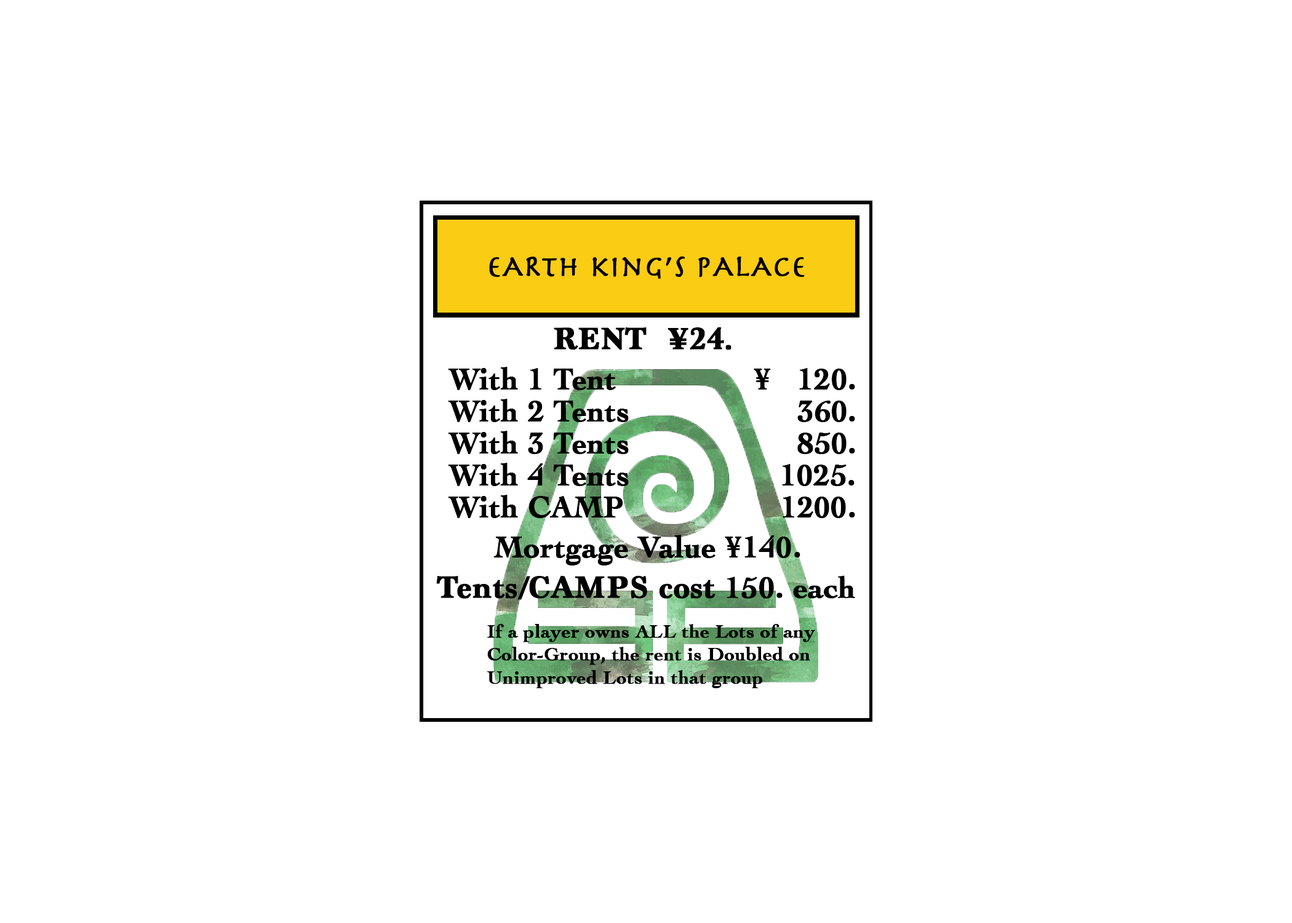
<style>
.page{position:relative;width:1292px;height:923px;background:#ffffff}
.page>*{position:absolute;margin:0}
.t1{font:30.8px "Herculanum";color:#000000;font-weight:bold}
.t2{font:32px "Marion-Bold";color:#000000;font-weight:bold}
.t3{font:30.8px "Cochin-Bold";color:#000000;font-weight:bold}
.t4{font:19.2px "Cochin-Bold";color:#000000;font-weight:bold}
</style>
<div class="page">
<p class="t1" style="left:489px;top:256px;width:316px;height:23px">EARth king’s pAlAce</p>
<p class="t2" style="left:554px;top:327px;width:178px;height:23px">RENT  ¥24.</p>
<p class="t3" style="left:448px;top:367px;width:407px;height:23px">With 1 Tent               ¥   120.</p>
<p class="t3" style="left:448px;top:399px;width:407px;height:23px">With 2 Tents                   360.</p>
<p class="t3" style="left:448px;top:431px;width:407px;height:23px">With 3 Tents                   850.</p>
<p class="t3" style="left:448px;top:463px;width:407px;height:23px">With 4 Tents                 1025.</p>
<p class="t3" style="left:448px;top:495px;width:407px;height:23px">With CAMP                1200.</p>
<p class="t3" style="left:493px;top:535px;width:307px;height:30px">Mortgage Value ¥140.</p>
<p class="t2" style="left:436px;top:575px;width:419px;height:25px">Tents/CAMPS cost <span class="t3">150. each</span></p>
<p class="t4" style="left:487px;top:624px;width:328px;height:64px">If a player owns ALL the Lots of any <br>Color-Group, the rent is Doubled on <br>Unimproved Lots in that group</p>
</div>
